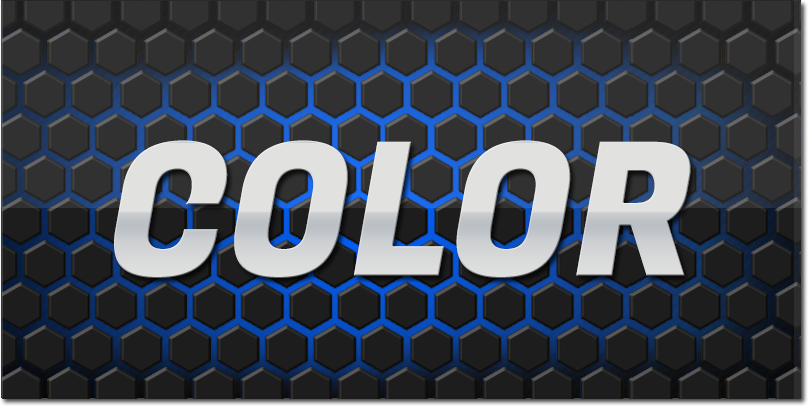
<style>
.page{position:relative;width:808px;height:406px;background:#313131}
.page>*{position:absolute;margin:0}
.t1{font:185.2px "FugazOne-Regular";color:#dfdfdf}
</style>
<div class="page">
<p class="t1" style="left:114px;top:140px;width:577px;height:138px">COLOR</p>
</div>
